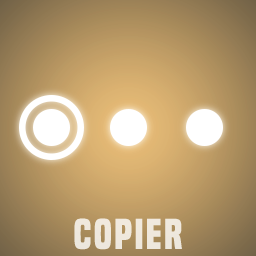
<style>
.page{position:relative;width:256px;height:256px}
.page>*{position:absolute;margin:0}
.t1{font:40px "BuiltTitlingRg-Bold";letter-spacing:0.055em;color:#dddddd;text-transform:uppercase}
</style>
<div class="page">
<p class="t1" style="left:74px;top:218px;width:108px;height:32px">copier</p>
</div>
